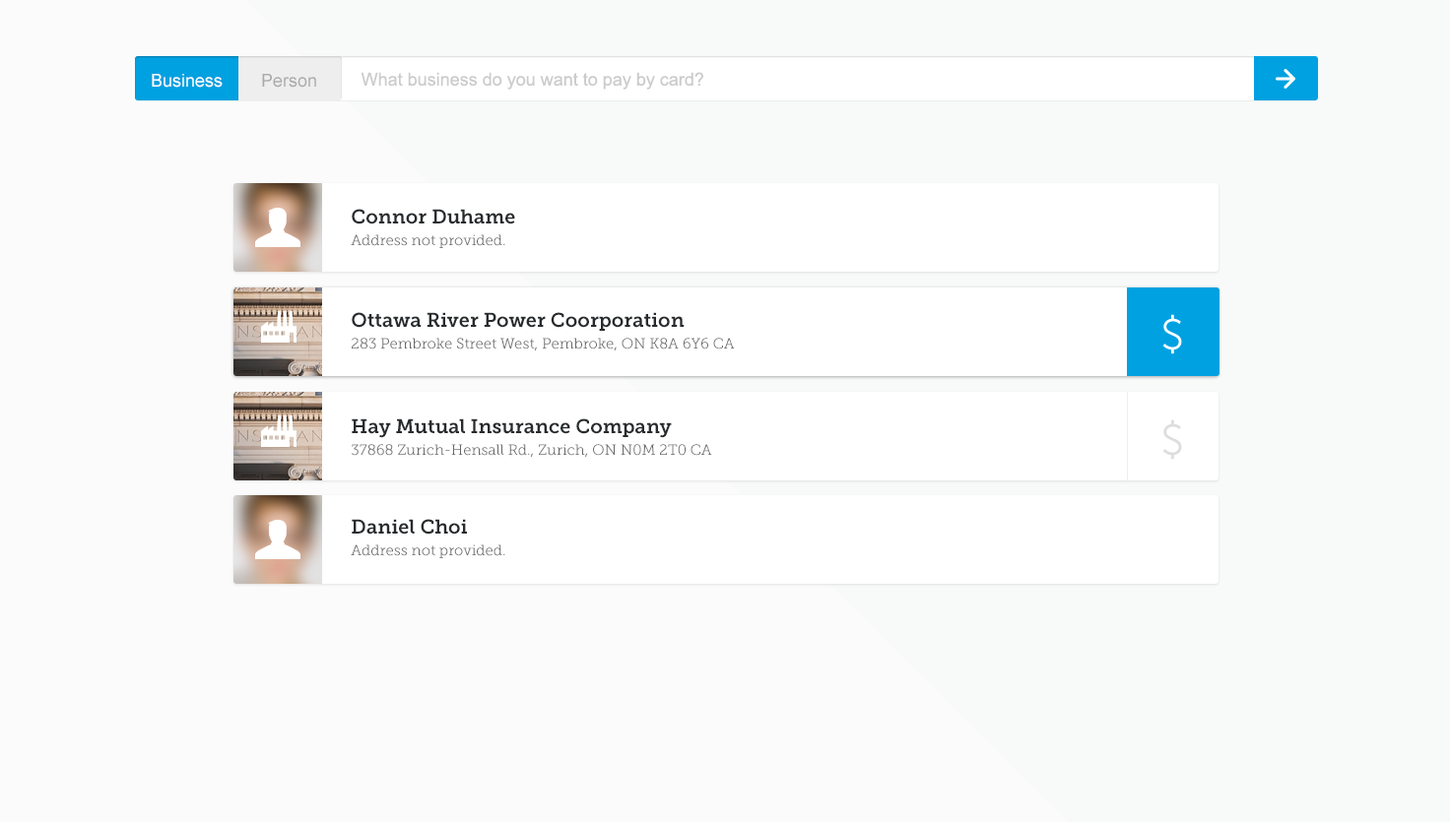
<style>
.page{position:relative;width:1450px;height:822px;background:#fbfbfb}
.page>*{position:absolute;margin:0}
.t1{font:17.7px "ArialMT";color:#ffffff}
.t2{font:17.7px "ArialMT";color:#aaaaaa}
.t3{font:17.7px "ArialMT";color:#cccccc}
.t4{font:14.8px/21.7px "MuseoSlab-300";color:#666666}
.t5{font:19.7px/21.7px "MuseoSlab-700";color:#282b2d}
</style>
<div class="page">
<p class="t1" style="left:152px;top:74px;width:71px;height:14px">Business</p>
<p class="t2" style="left:262px;top:74px;width:54px;height:14px">Person</p>
<p class="t3" style="left:360px;top:72px;width:343px;height:18px">What business do you want to pay by card?</p>
<p class="t4" style="left:351px;top:209px;width:164px;height:39px"><span class="t5">Connor Duhame<br></span>Address not provided.</p>
<p class="t4" style="left:352px;top:312px;width:383px;height:39px"><span class="t5">Ottawa River Power Coorporation<br></span>283 Pembroke Street West, Pembroke, ON K8A 6Y6 CA</p>
<p class="t4" style="left:352px;top:419px;width:360px;height:38px"><span class="t5">Hay Mutual Insurance Company<br></span>37868 Zurich-Hensall Rd., Zurich, ON N0M 2T0 CA</p>
<p class="t4" style="left:351px;top:519px;width:154px;height:39px"><span class="t5">Daniel Choi<br></span>Address not provided.</p>
</div>
